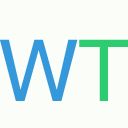
<style>
.page{position:relative;width:128px;height:128px;background:#fbfdf9}
.page>*{position:absolute;margin:0}
.t1{font:85px "Helvetica";letter-spacing:-0.01em;color:#3498db}
.t2{font:85px "Helvetica";letter-spacing:-0.01em;color:#2ecc71}
</style>
<div class="page">
<p class="t1" style="left:0px;top:39px;width:78px;height:62px">W</p>
<p class="t2" style="left:79px;top:39px;width:50px;height:62px">T</p>
</div>
